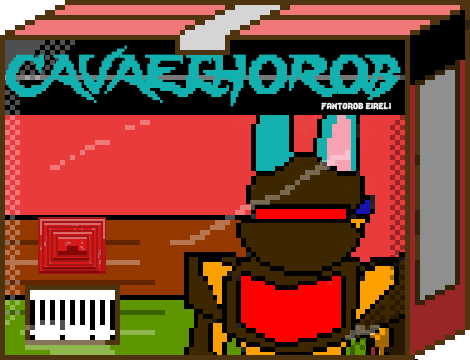
<style>
.page{position:relative;width:470px;height:360px}
.page>*{position:absolute;margin:0}
.t1{font:48.3px "Lady-Radical";color:#12b0ae;scale:0.84 1}
.t2{font:12px "Lady-Radical";color:#fbfbfb}
</style>
<div class="page">
<p class="t1" style="left:6px;top:45px;width:395px;height:62px">CAVAELHOROB</p>
<p class="t2" style="left:321px;top:102px;width:70px;height:8px">fantorob eireli</p>
</div>
